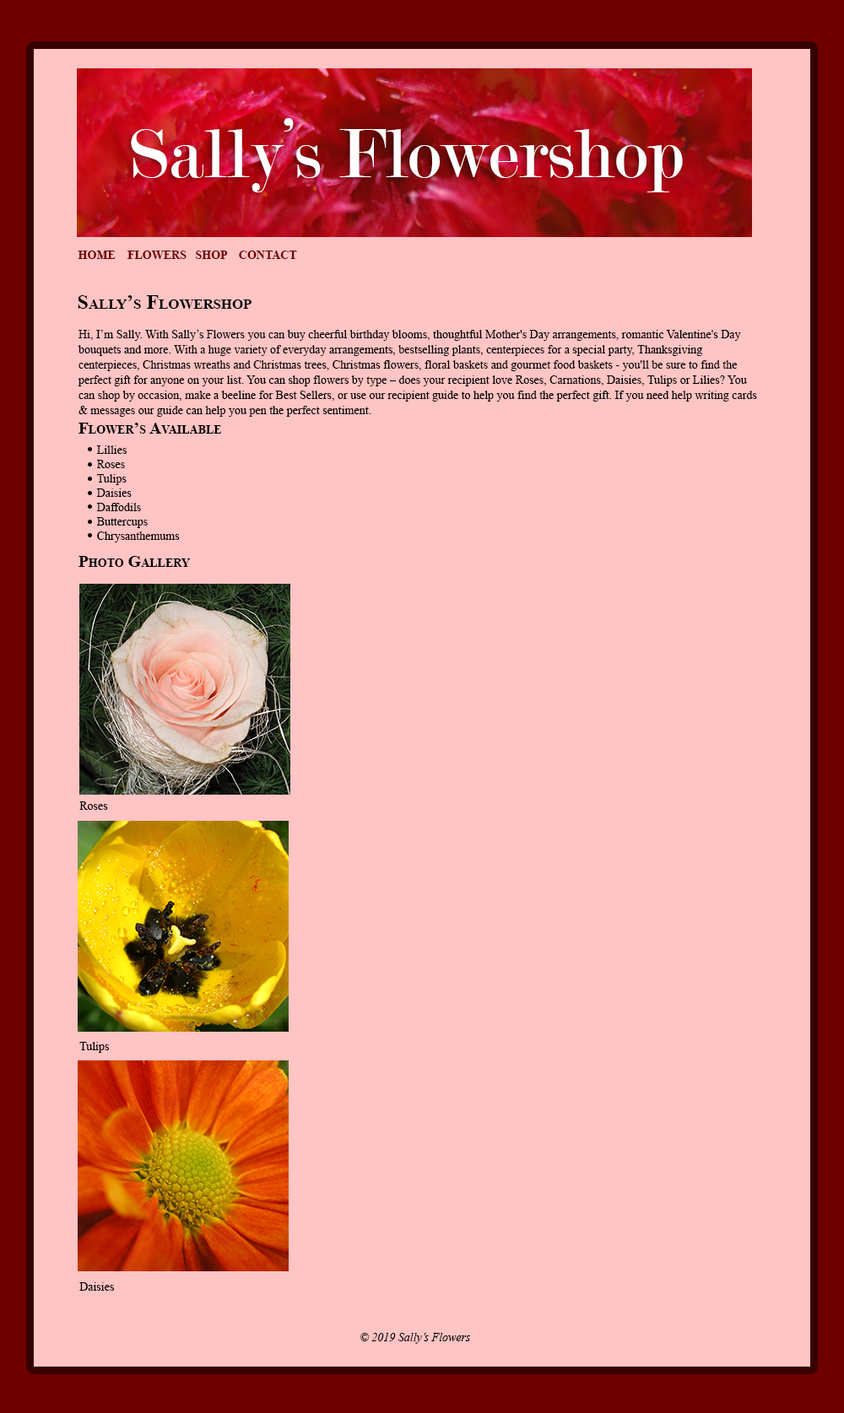
<style>
.page{position:relative;width:844px;height:1413px;background:#ffc4c4}
.page>*{position:absolute;margin:0}
.t1{font:11.8px "TimesNewRomanPS-BoldMT";color:#6f0000;text-transform:uppercase}
.t2{font:20.2px "TimesNewRomanPS-BoldMT";color:#000000;font-variant:small-caps}
.t3{font:11.8px/15.2px "TimesNewRomanPSMT";color:#000000}
.t4{font:16.9px "TimesNewRomanPS-BoldMT";color:#000000;font-variant:small-caps}
.t5{font:11.8px/14.3px "TimesNewRomanPSMT";color:#000000}
.t6{font:11.8px "TimesNewRomanPSMT";color:#000000}
.t7{font:11.8px "TimesNewRomanPS-ItalicMT";color:#000000}
</style>
<div class="page">
<p class="t1" style="left:78px;top:251px;width:219px;height:8px">Home    Flowers   Shop    Contact</p>
<p class="t2" style="left:78px;top:295px;width:173px;height:14px">Sally’s Flowershop</p>
<p class="t3" style="left:78px;top:330px;width:679px;height:87px">Hi, I’m Sally. With Sally’s Flowers you can buy cheerful birthday blooms, thoughtful Mother's Day arrangements, romantic Valentine's Day bouquets and more. With a huge variety of everyday arrangements, bestselling plants, centerpieces for a special party, Thanksgiving centerpieces, Christmas wreaths and Christmas trees, Christmas flowers, floral baskets and gourmet food baskets - you'll be sure to find the perfect gift for anyone on your list. You can shop flowers by type – does your recipient love Roses, Carnations, Daisies, Tulips or Lilies? You can shop by occasion, make a beeline for Best Sellers, or use our recipient guide to help you find the perfect gift. If you need help writing cards &amp; messages our guide can help you pen the perfect sentiment.</p>
<p class="t4" style="left:78px;top:423px;width:143px;height:11px">Flower’s Available</p>
<p class="t5" style="left:96px;top:445px;width:84px;height:98px">Lillies<br>Roses<br>Tulips<br>Daisies<br>Daffodils<br>Buttercups<br>Chrysanthemums</p>
<p class="t4" style="left:78px;top:556px;width:113px;height:11px">Photo Gallery</p>
<p class="t6" style="left:79px;top:802px;width:29px;height:8px">Roses</p>
<p class="t6" style="left:79px;top:1042px;width:30px;height:11px">Tulips</p>
<p class="t6" style="left:79px;top:1282px;width:35px;height:9px">Daisies</p>
<p class="t7" style="left:360px;top:1333px;width:111px;height:11px">© 2019 Sally’s Flowers</p>
</div>
